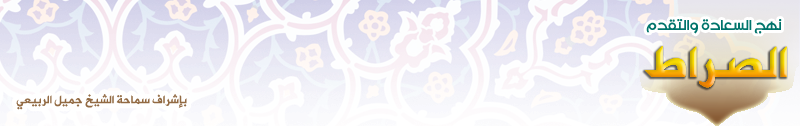
<style>
.page{position:relative;width:800px;height:126px}
.page>*{position:absolute;margin:0}
.t1{font:22.8px "Ah-Eshtar";color:#00746b}
.t2{font:14px "Ah-aljazeera-light";color:#926a43}
</style>
<div class="page">
<p class="t1" style="left:646px;top:19px;width:136px;height:15px">نهج السعادة والتقدم</p>
<p class="t2" style="left:16px;top:94px;width:171px;height:16px">بإشراف سماحة الشيخ جميل الربيعي</p>
</div>
